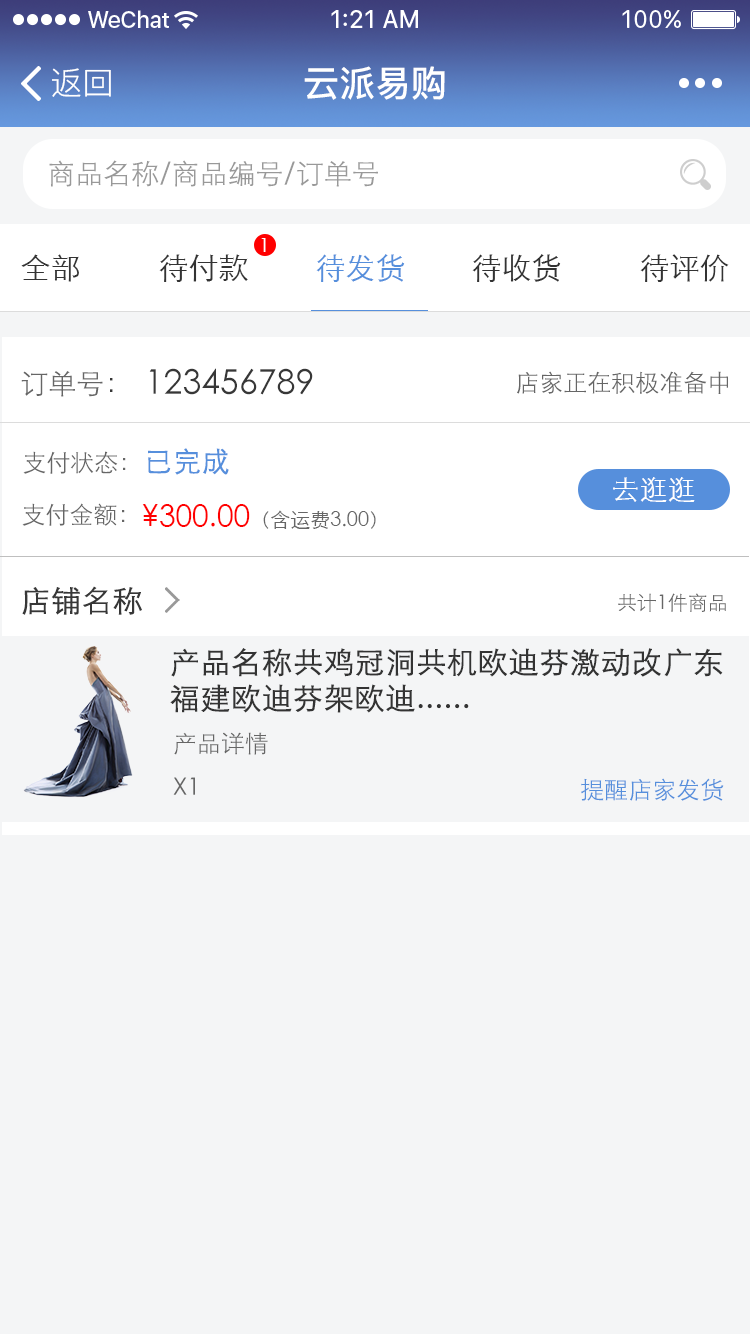
<style>
.page{position:relative;width:750px;height:1334px;background:#f4f5f6}
.page>*{position:absolute;margin:0}
.t1{font:32px "PingFang-SC-Regular";color:#ffffff}
.t2{font:36px "PingFang-SC-Bold";color:#ffffff}
.t3{font:28px "STXihei";color:#999999}
.t4{font:20px "STXihei";color:#ffffff}
.t5{font:30px "STXihei";color:#333333}
.t6{font:30px "STXihei";color:#568fdc}
.t7{font:28px "STXihei";color:#666666}
.t8{font:28px "STXihei";color:#373737}
.t9{font:34px "STXihei";color:#373737}
.t10{font:24px "STXihei";color:#666666}
.t11{font:28px "STXihei";color:#568fdc;font-weight:bold}
.t12{font:28px "STXihei";color:#ffffff}
.t13{font:20px "STXihei";color:#666666}
.t14{font:30px "STXihei";color:#ff0000}
.t15{font:30px "STXihei";color:#373737;font-weight:bold}
.t16{font:30px "STXihei";color:#333333;font-weight:bold}
.t17{font:24px "STXihei";color:#568fdc}
</style>
<div class="page">
<p class="t1" style="left:52px;top:68px;width:59px;height:29px">返回</p>
<p class="t2" style="left:304px;top:66px;width:141px;height:34px">云派易购</p>
<p class="t3" style="left:49px;top:160px;width:329px;height:27px">商品名称/商品编号/订单号</p>
<p class="t4" style="left:261px;top:238px;width:5px;height:14px">1</p>
<p class="t5" style="left:21px;top:254px;width:58px;height:28px">全部</p>
<p class="t5" style="left:159px;top:254px;width:89px;height:28px">待付款</p>
<p class="t6" style="left:316px;top:254px;width:89px;height:28px">待发货</p>
<p class="t5" style="left:472px;top:254px;width:89px;height:28px">待收货</p>
<p class="t5" style="left:640px;top:254px;width:89px;height:28px">待评价</p>
<p class="t7" style="left:21px;top:371px;width:92px;height:26px">订单号<span class="t8">：</span></p>
<p class="t9" style="left:149px;top:368px;width:164px;height:27px">123456789</p>
<p class="t10" style="left:517px;top:371px;width:211px;height:23px">店家正在积极准备中</p>
<p class="t11" style="left:148px;top:448px;width:81px;height:27px">已完成</p>
<p class="t10" style="left:23px;top:451px;width:103px;height:23px">支付状态：</p>
<p class="t12" style="left:613px;top:477px;width:82px;height:25px">去逛逛</p>
<p class="t10" style="left:22px;top:503px;width:103px;height:23px">支付金额：</p>
<p class="t13" style="left:142px;top:504px;width:234px;height:25px"><span class="t14">¥300.00</span>（含运费3.00）</p>
<p class="t15" style="left:22px;top:586px;width:120px;height:29px">店铺名称</p>
<p class="t13" style="left:618px;top:593px;width:108px;height:19px">共计1件商品</p>
<p class="t16" style="left:170px;top:648px;width:553px;height:65px">产品名称共鸡冠洞共机欧迪芬激动改广东福建欧迪芬架欧迪......</p>
<p class="t10" style="left:174px;top:732px;width:94px;height:23px">产品详情</p>
<p class="t10" style="left:173px;top:777px;width:22px;height:18px">X1</p>
<p class="t17" style="left:581px;top:778px;width:143px;height:23px">提醒店家发货</p>
</div>
